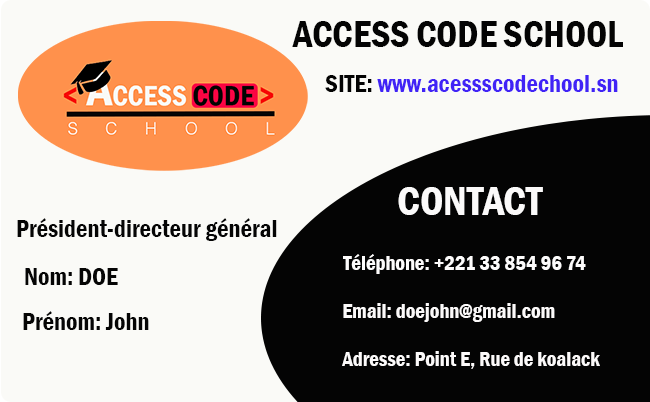
<style>
.page{position:relative;width:650px;height:402px;background:#fafaf7}
.page>*{position:absolute;margin:0}
.t1{font:37.5px "FranklinGothic-DemiCond";color:#040404}
.t2{font:25px "FranklinGothic-DemiCond";color:#4123f6}
.t3{font:25px "FranklinGothic-DemiCond";color:#030303}
.t4{font:41.7px "FranklinGothic-DemiCond";color:#fbfafa}
.t5{font:25px "FranklinGothic-DemiCond";color:#050505}
.t6{font:20.8px "FranklinGothic-DemiCond";color:#fdfcfc}
.t7{font:20.8px "FranklinGothic-DemiCond";color:#fcfafa}
</style>
<div class="page">
<p class="t1" style="left:292px;top:21px;width:331px;height:26px">ACCESS CODE SCHOOL</p>
<p class="t2" style="left:325px;top:75px;width:293px;height:17px"><span class="t3">SITE: </span>www.acessscodechool.sn</p>
<p class="t4" style="left:398px;top:187px;width:145px;height:28px">CONTACT</p>
<p class="t5" style="left:17px;top:218px;width:260px;height:23px">Président-directeur général</p>
<p class="t6" style="left:343px;top:254px;width:243px;height:20px">Téléphone: +221 33 854 96 74</p>
<p class="t5" style="left:25px;top:268px;width:93px;height:17px">Nom: DOE</p>
<p class="t7" style="left:343px;top:303px;width:212px;height:19px">Email: doejohn@gmail.com</p>
<p class="t5" style="left:23px;top:311px;width:126px;height:19px">Prénom: John</p>
<p class="t7" style="left:342px;top:351px;width:258px;height:18px">Adresse: Point E, Rue de koalack</p>
</div>
